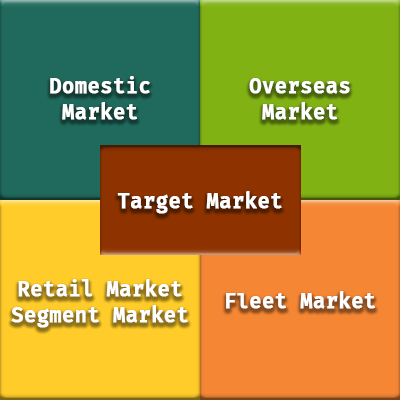
<style>
.page{position:relative;width:400px;height:400px}
.page>*{position:absolute;margin:0}
.t1{font:22px "FiraCode-SemiBold";color:#ffffff;font-weight:bold;scale:0.9 1}
</style>
<div class="page">
<p class="t1" style="left:50px;top:76px;width:100px;height:44px;text-align:center">Domestic<br>Market</p>
<p class="t1" style="left:249px;top:78px;width:101px;height:42px;text-align:center">Overseas<br>Market</p>
<p class="t1" style="left:117px;top:191px;width:165px;height:23px">Target Market</p>
<p class="t1" style="left:11px;top:279px;width:177px;height:49px;text-align:center">Retail Market<br>Segment Market</p>
<p class="t1" style="left:226px;top:291px;width:149px;height:18px">Fleet Market</p>
</div>
